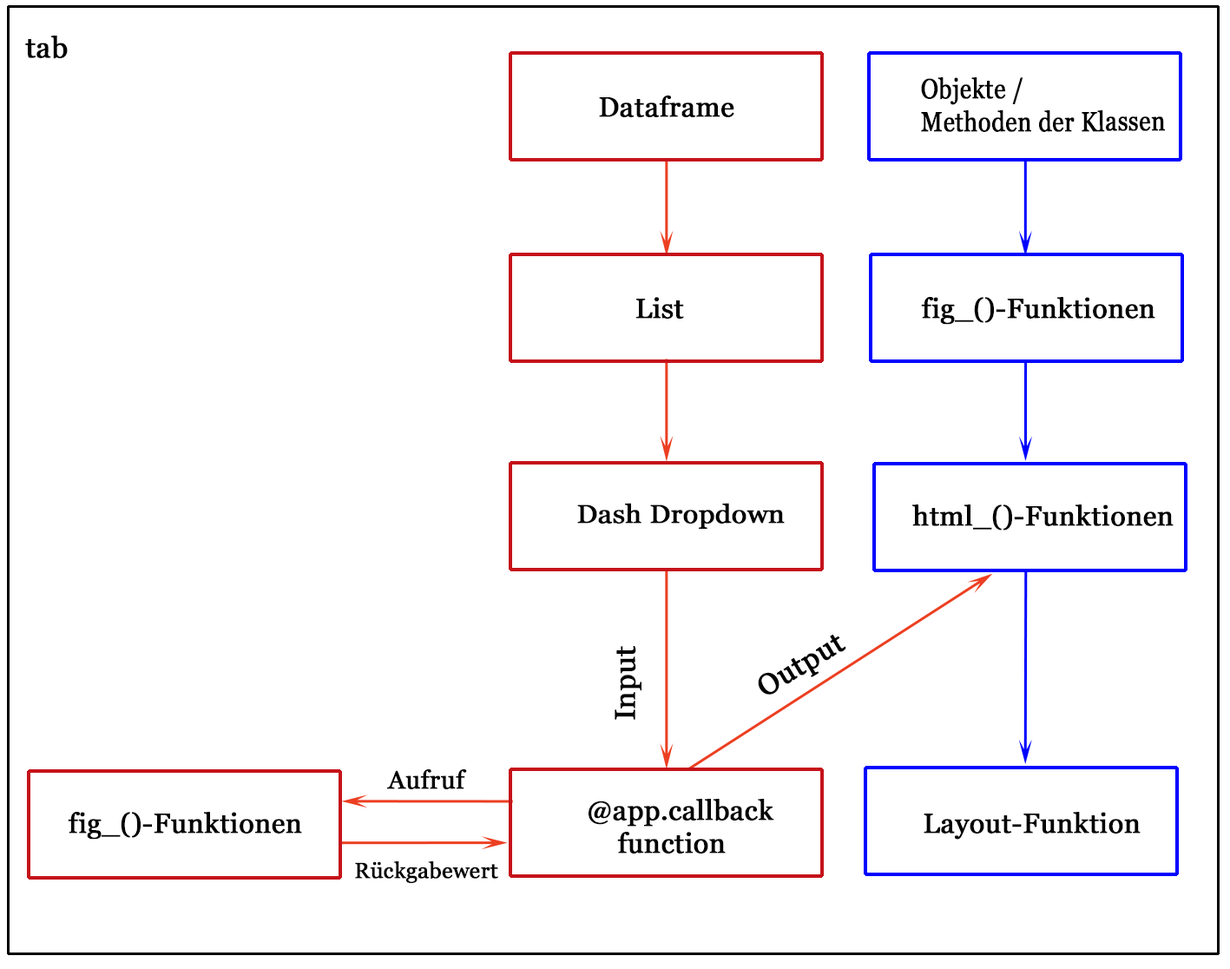
<style>
.page{position:relative;width:1230px;height:969px;background:#ffffff}
.page>*{position:absolute;margin:0}
.t1{font:29px "Georgia";color:#000000;font-weight:bold}
.t2{font:27.6px "Georgia";color:#000000;font-weight:bold;scale:0.85 1}
.t3{font:27.6px "Georgia";color:#000000;font-weight:bold}
.t4{font:25.5px "Georgia";color:#000000;font-weight:bold;scale:1.08 1}
.t5{font:28.9px "Georgia";color:#000000;font-weight:bold}
.t6{font:25.3px "Georgia";color:#000000;font-weight:bold}
.t7{font:21.7px "Georgia";color:#000000;font-weight:bold}
</style>
<div class="page">
<p class="t1" style="left:25px;top:36px;width:43px;height:23px">tab</p>
<p class="t2" style="left:921px;top:77px;width:244px;height:55px">Objekte / <br>Methoden der Klassen</p>
<p class="t3" style="left:599px;top:96px;width:136px;height:21px">Dataframe</p>
<p class="t3" style="left:637px;top:297px;width:47px;height:22px">List</p>
<p class="t3" style="left:921px;top:297px;width:235px;height:28px">fig_()-Funktionen</p>
<p class="t4" style="left:577px;top:503px;width:208px;height:26px">Dash Dropdown</p>
<p class="t3" style="left:913px;top:505px;width:261px;height:26px">html_()-Funktionen</p>
<p class="t5" style="left:758px;top:635px;width:89px;height:60px;rotate:-31deg">Output</p>
<p class="t5" style="left:615px;top:646px;width:27px;height:74px;rotate:-90deg">Input</p>
<p class="t6" style="left:387px;top:769px;width:80px;height:20px">Aufruf</p>
<p class="t3" style="left:589px;top:799px;width:186px;height:55px">@app.callback<br> function</p>
<p class="t3" style="left:68px;top:812px;width:234px;height:28px">fig_()-Funktionen</p>
<p class="t3" style="left:924px;top:812px;width:217px;height:28px">Layout-Funktion</p>
<p class="t7" style="left:355px;top:861px;width:143px;height:22px">Rückgabewert</p>
</div>
